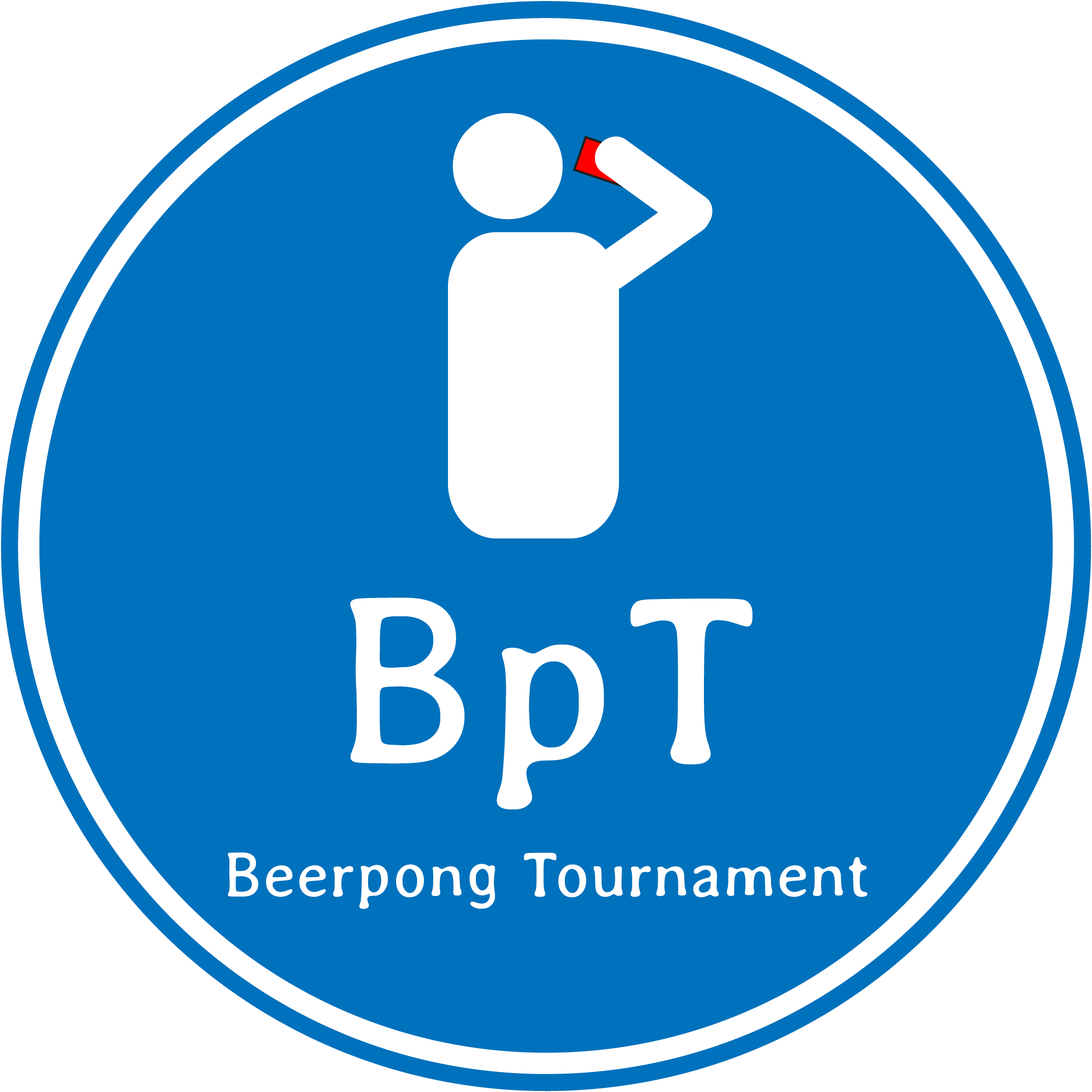
<style>
.page{position:relative;width:1092px;height:1092px;background:#0071bc}
.page>*{position:absolute;margin:0}
.t1{font:64px "Averia-Regular";color:#ffffff}
.t2{font:241px "Averia-Regular";color:#ffffff}
</style>
<div class="page">
<p class="t1" style="left:228px;top:597px;width:640px;height:312px;text-align:center"><span class="t2">BpT<br><br></span>Beerpong Tournament</p>
</div>
